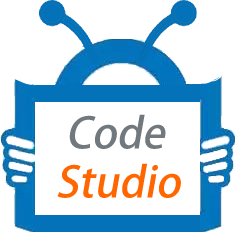
<style>
.page{position:relative;width:236px;height:236px;background:#ffffff}
.page>*{position:absolute;margin:0}
.t1{font:42px "AdobeHeitiStd-Regular";color:#71797e;font-style:italic}
.t2{font:42px "AdobeHeitiStd-Regular";color:#ff6600;font-style:italic}
</style>
<div class="page">
<p class="t1" style="left:69px;top:114px;width:97px;height:35px">Code</p>
<p class="t2" style="left:57px;top:163px;width:124px;height:35px">Studio</p>
</div>
